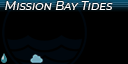
<style>
.page{position:relative;width:128px;height:64px;background:#000000}
.page>*{position:absolute;margin:0}
.t1{font:12px "Montserrat-Regular";color:#fffefe;font-variant:small-caps;font-style:italic}
</style>
<div class="page">
<p class="t1" style="left:5px;top:1px;width:108px;height:9px">Mission Bay Tides</p>
</div>
